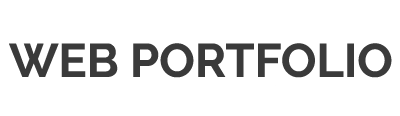
<style>
.page{position:relative;width:400px;height:116px;background:#ffffff}
.page>*{position:absolute;margin:0}
.t1{font:47px "Raleway-Bold";color:#3a3a3a}
</style>
<div class="page">
<p class="t1" style="left:9px;top:43px;width:383px;height:35px">WEB PORTFOLIO</p>
</div>
